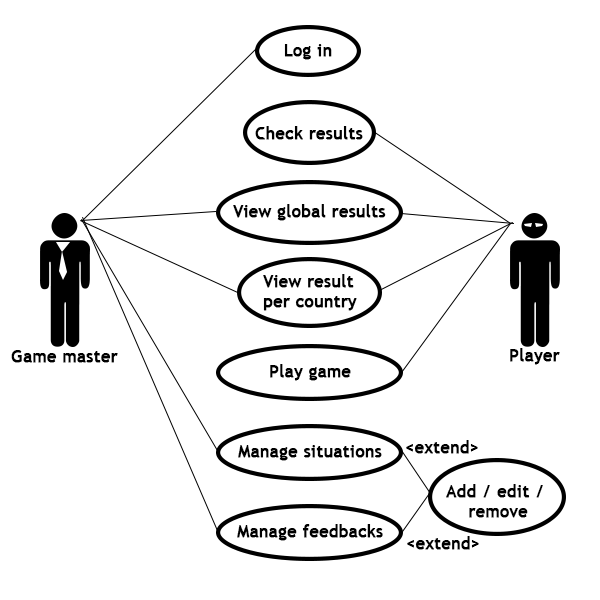
<style>
.page{position:relative;width:600px;height:600px;background:#ffffff}
.page>*{position:absolute;margin:0}
.t1{font:16.7px "TrebuchetMS";letter-spacing:0.01em;color:#000000;font-weight:bold}
</style>
<div class="page">
<p class="t1" style="left:284px;top:44px;width:48px;height:16px">Log in</p>
<p class="t1" style="left:255px;top:126px;width:108px;height:14px">Check results</p>
<p class="t1" style="left:233px;top:204px;width:153px;height:17px">View global results</p>
<p class="t1" style="left:263px;top:274px;width:94px;height:37px">View result <br>per country</p>
<p class="t1" style="left:11px;top:350px;width:107px;height:13px">Game master</p>
<p class="t1" style="left:510px;top:348px;width:50px;height:17px">Player</p>
<p class="t1" style="left:270px;top:364px;width:81px;height:17px">Play game</p>
<p class="t1" style="left:238px;top:445px;width:144px;height:16px">Manage situations</p>
<p class="t1" style="left:406px;top:440px;width:72px;height:14px">&lt;extend&gt;</p>
<p class="t1" style="left:446px;top:484px;width:97px;height:34px;text-align:center">Add / edit / <br>remove</p>
<p class="t1" style="left:237px;top:524px;width:146px;height:17px">Manage feedbacks</p>
<p class="t1" style="left:407px;top:536px;width:72px;height:14px">&lt;extend&gt;</p>
</div>
